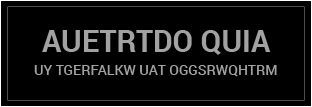
<style>
.page{position:relative;width:312px;height:107px;background:#000000}
.page>*{position:absolute;margin:0}
.t1{font:30px "Roboto-Bold";color:#a2a2a2}
.t2{font:14px "Roboto-Medium";color:#a2a2a2}
</style>
<div class="page">
<p class="t1" style="left:42px;top:30px;width:229px;height:25px">AUETRTDO QUIA</p>
<p class="t2" style="left:34px;top:65px;width:243px;height:12px">UY TGERFALKW UAT OGGSRWQHTRM</p>
</div>
